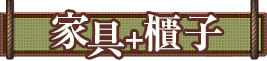
<style>
.page{position:relative;width:267px;height:61px;background:#ffffff}
.page>*{position:absolute;margin:0}
.t1{font:40px "RyuminPr6N-ExBold";letter-spacing:-0.08em;color:#fffff7}
.t2{font:40px "RyuminPr6N-ExBold";letter-spacing:0.07em;color:#fffff7}
.t3{font:30px "RyuminPro-ExBold";letter-spacing:-0.1em;color:#fffff7}
</style>
<div class="page">
<p class="t1" style="left:51px;top:12px;width:38px;height:37px">家</p>
<p class="t2" style="left:143px;top:13px;width:79px;height:39px">櫃子</p>
<p class="t1" style="left:87px;top:21px;width:38px;height:36px">具</p>
<p class="t3" style="left:126px;top:32px;width:17px;height:17px">+</p>
</div>
